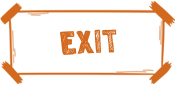
<style>
.page{position:relative;width:178px;height:85px;background:#ffffff}
.page>*{position:absolute;margin:0}
.t1{font:40px "Chalkboy-Regular";color:#d2691e}
</style>
<div class="page">
<p class="t1" style="left:60px;top:29px;width:57px;height:26px;rotate:-3deg">EXIT</p>
</div>
